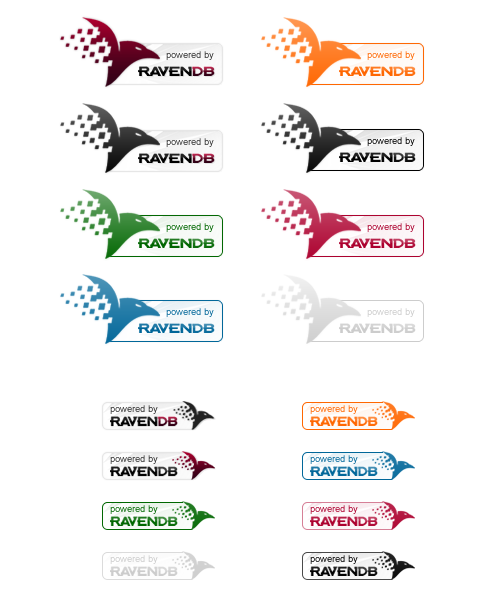
<style>
.page{position:relative;width:500px;height:600px;background:#ffffff}
.page>*{position:absolute;margin:0}
.t1{font:9.5px "ArialMT"}
.t2{font:9.5px "ArialMT";color:#cccccc}
</style>
<div class="page">
<p class="t1" style="left:166px;top:51px;width:48px;height:9px">powered by</p>
<p class="t1" style="left:367px;top:51px;width:48px;height:9px">powered by</p>
<p class="t1" style="left:367px;top:137px;width:48px;height:9px">powered by</p>
<p class="t1" style="left:166px;top:138px;width:48px;height:9px">powered by</p>
<p class="t1" style="left:166px;top:223px;width:48px;height:9px">powered by</p>
<p class="t1" style="left:367px;top:223px;width:48px;height:9px">powered by</p>
<p class="t1" style="left:166px;top:308px;width:48px;height:9px">powered by</p>
<p class="t2" style="left:367px;top:308px;width:48px;height:9px">powered by</p>
<p class="t1" style="left:110px;top:405px;width:48px;height:9px">powered by</p>
<p class="t1" style="left:310px;top:405px;width:48px;height:9px">powered by</p>
<p class="t1" style="left:110px;top:455px;width:48px;height:9px">powered by</p>
<p class="t1" style="left:310px;top:455px;width:48px;height:9px">powered by</p>
<p class="t1" style="left:110px;top:505px;width:48px;height:9px">powered by</p>
<p class="t1" style="left:310px;top:505px;width:48px;height:9px">powered by</p>
<p class="t1" style="left:110px;top:555px;width:48px;height:9px">powered by</p>
<p class="t1" style="left:310px;top:555px;width:48px;height:9px">powered by</p>
</div>
